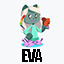
<style>
.page{position:relative;width:64px;height:64px;background:#f6f8fa}
.page>*{position:absolute;margin:0}
.t1{font:16px "Impact";color:#000000}
</style>
<div class="page">
<p class="t1" style="left:22px;top:49px;width:20px;height:13px">EVA</p>
</div>
